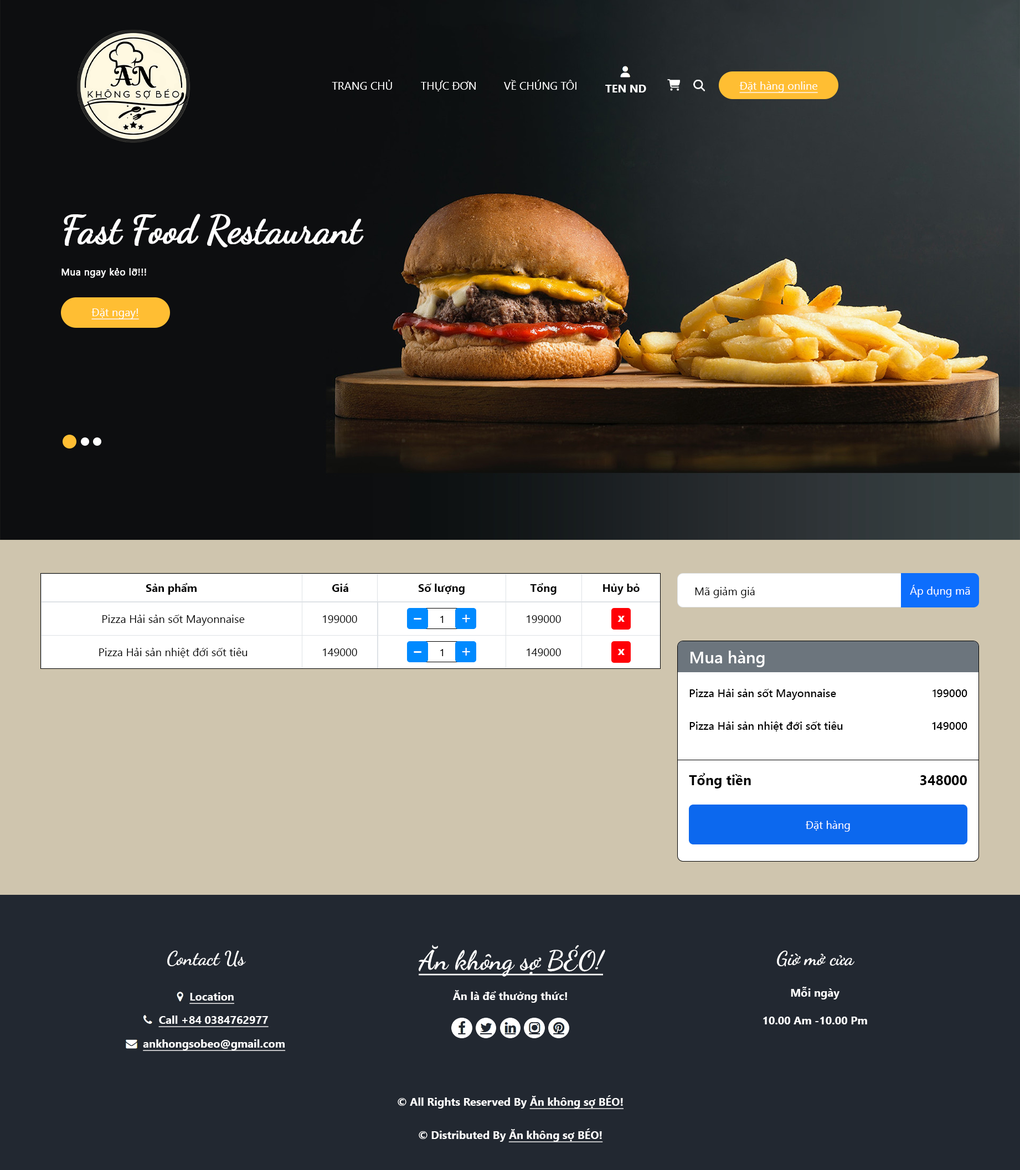
<style>
.page{position:relative;width:1020px;height:1170px;background:#222831}
.page>*{position:absolute;margin:0}
.t1{font:11.1px "SegoeUI";color:#ffffff}
.t2{font:11.1px "SegoeUI-Bold";color:#ffffff}
.t3{font:11.1px "SegoeUI";color:#ffffff;text-decoration:underline}
.t4{font:38.7px "DancingScript-Regular";letter-spacing:-0.02em;color:#ffffff;font-weight:bold}
.t5{font:9.4px "SegoeUI";letter-spacing:0.023em;color:#ffffff;font-weight:bold}
.t6{font:11.1px "SegoeUI-Bold";color:#000000}
.t7{font:11.1px "SegoeUI";color:#000000}
.t8{font:27.7px "SegoeUI";color:#ffffff}
.t9{font:10.5px "SegoeUI";color:#000000}
.t10{font:16.6px "SegoeUI";color:#ffffff}
.t11{font:12.2px "SegoeUI-Bold";color:#ffffff}
.t12{font:16.6px "SegoeUI-Semibold";color:#ffffff}
.t13{font:11.1px "SegoeUI-Semibold";color:#000000}
.t14{font:13.8px "SegoeUI-Bold";color:#000000}
.t15{font:19.4px "DancingScript-Bold";color:#ffffff}
.t16{font:26.6px "DancingScript-Bold";color:#ffffff;text-decoration:underline}
.t17{font:11.1px "SegoeUI-Bold";color:#ffffff;text-decoration:underline}
</style>
<div class="page">
<p class="t1" style="left:332px;top:80px;width:60px;height:10px">TRANG CHỦ</p>
<p class="t1" style="left:421px;top:80px;width:54px;height:11px">THỰC ĐƠN</p>
<p class="t1" style="left:504px;top:80px;width:72px;height:10px">VỀ CHÚNG TÔI</p>
<p class="t2" style="left:605px;top:85px;width:41px;height:7px">TEN ND</p>
<p class="t3" style="left:739px;top:81px;width:79px;height:12px">Đặt hàng online</p>
<p class="t4" style="left:64px;top:214px;width:300px;height:33px">Fast Food Restaurant</p>
<p class="t5" style="left:61px;top:268px;width:85px;height:10px">Mua ngay kẻo lỡ!!!</p>
<p class="t3" style="left:91px;top:308px;width:48px;height:11px">Đặt ngay!</p>
<p class="t6" style="left:146px;top:583px;width:50px;height:11px">Sản phẩm</p>
<p class="t6" style="left:332px;top:583px;width:16px;height:9px">Giá</p>
<p class="t6" style="left:418px;top:583px;width:46px;height:11px">Số lượng</p>
<p class="t6" style="left:530px;top:583px;width:26px;height:11px">Tổng</p>
<p class="t6" style="left:603px;top:583px;width:36px;height:11px">Hủy bỏ</p>
<p class="t7" style="left:695px;top:587px;width:59px;height:11px">Mã giảm giá</p>
<p class="t1" style="left:909px;top:585px;width:61px;height:12px">Áp dụng mã</p>
<p class="t7" style="left:102px;top:614px;width:143px;height:11px">Pizza Hải sản sốt Mayonnaise</p>
<p class="t7" style="left:323px;top:615px;width:34px;height:8px">199000</p>
<p class="t8" style="left:413px;top:618px;width:8px;height:1px">-</p>
<p class="t9" style="left:440px;top:615px;width:3px;height:8px">1</p>
<p class="t10" style="left:462px;top:614px;width:8px;height:8px">+</p>
<p class="t7" style="left:526px;top:615px;width:35px;height:8px">199000</p>
<p class="t11" style="left:617px;top:615px;width:7px;height:7px">x</p>
<p class="t7" style="left:99px;top:648px;width:148px;height:10px">Pizza Hải sản nhiệt đới sốt tiêu</p>
<p class="t7" style="left:323px;top:648px;width:34px;height:8px">149000</p>
<p class="t8" style="left:413px;top:651px;width:8px;height:2px">-</p>
<p class="t9" style="left:440px;top:649px;width:3px;height:7px">1</p>
<p class="t10" style="left:462px;top:648px;width:8px;height:7px">+</p>
<p class="t7" style="left:526px;top:648px;width:35px;height:8px">149000</p>
<p class="t11" style="left:617px;top:649px;width:7px;height:6px">x</p>
<p class="t12" style="left:690px;top:650px;width:74px;height:17px">Mua hàng</p>
<p class="t13" style="left:689px;top:689px;width:147px;height:11px">Pizza Hải sản sốt Mayonnaise</p>
<p class="t13" style="left:932px;top:689px;width:35px;height:8px">199000</p>
<p class="t13" style="left:689px;top:721px;width:153px;height:10px">Pizza Hải sản nhiệt đới sốt tiêu</p>
<p class="t13" style="left:932px;top:722px;width:35px;height:8px">149000</p>
<p class="t14" style="left:689px;top:773px;width:62px;height:15px">Tổng tiền</p>
<p class="t14" style="left:919px;top:775px;width:47px;height:10px">348000</p>
<p class="t1" style="left:805px;top:820px;width:45px;height:11px">Đặt hàng</p>
<p class="t15" style="left:167px;top:950px;width:79px;height:16px">Contact Us</p>
<p class="t16" style="left:418px;top:944px;width:187px;height:32px">Ăn không sợ BÉO!</p>
<p class="t15" style="left:777px;top:950px;width:77px;height:16px">Giờ mở cửa</p>
<p class="t2" style="left:453px;top:990px;width:114px;height:12px">Ăn là để thưởng thức!</p>
<p class="t2" style="left:790px;top:986px;width:49px;height:13px">Mỗi ngày</p>
<p class="t17" style="left:189px;top:992px;width:45px;height:12px">Location</p>
<p class="t17" style="left:158px;top:1015px;width:110px;height:12px">Call +84 0384762977</p>
<p class="t2" style="left:763px;top:1016px;width:104px;height:8px">10.00 Am -10.00 Pm</p>
<p class="t17" style="left:143px;top:1039px;width:143px;height:12px">ankhongsobeo@gmail.com</p>
<p class="t2" style="left:397px;top:1095px;width:226px;height:14px">© All Rights Reserved By <span class="t17">Ăn không sợ BÉO!</span></p>
<p class="t2" style="left:418px;top:1128px;width:185px;height:14px">© Distributed By <span class="t17">Ăn không sợ BÉO!</span></p>
</div>
